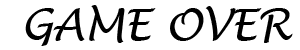
<style>
.page{position:relative;width:300px;height:50px;background:#ffffff}
.page>*{position:absolute;margin:0}
.t1{font:42.7px "LucidaHandwriting-Italic";color:#000000}
</style>
<div class="page">
<p class="t1" style="left:25px;top:5px;width:268px;height:41px">GAME OVER</p>
</div>
